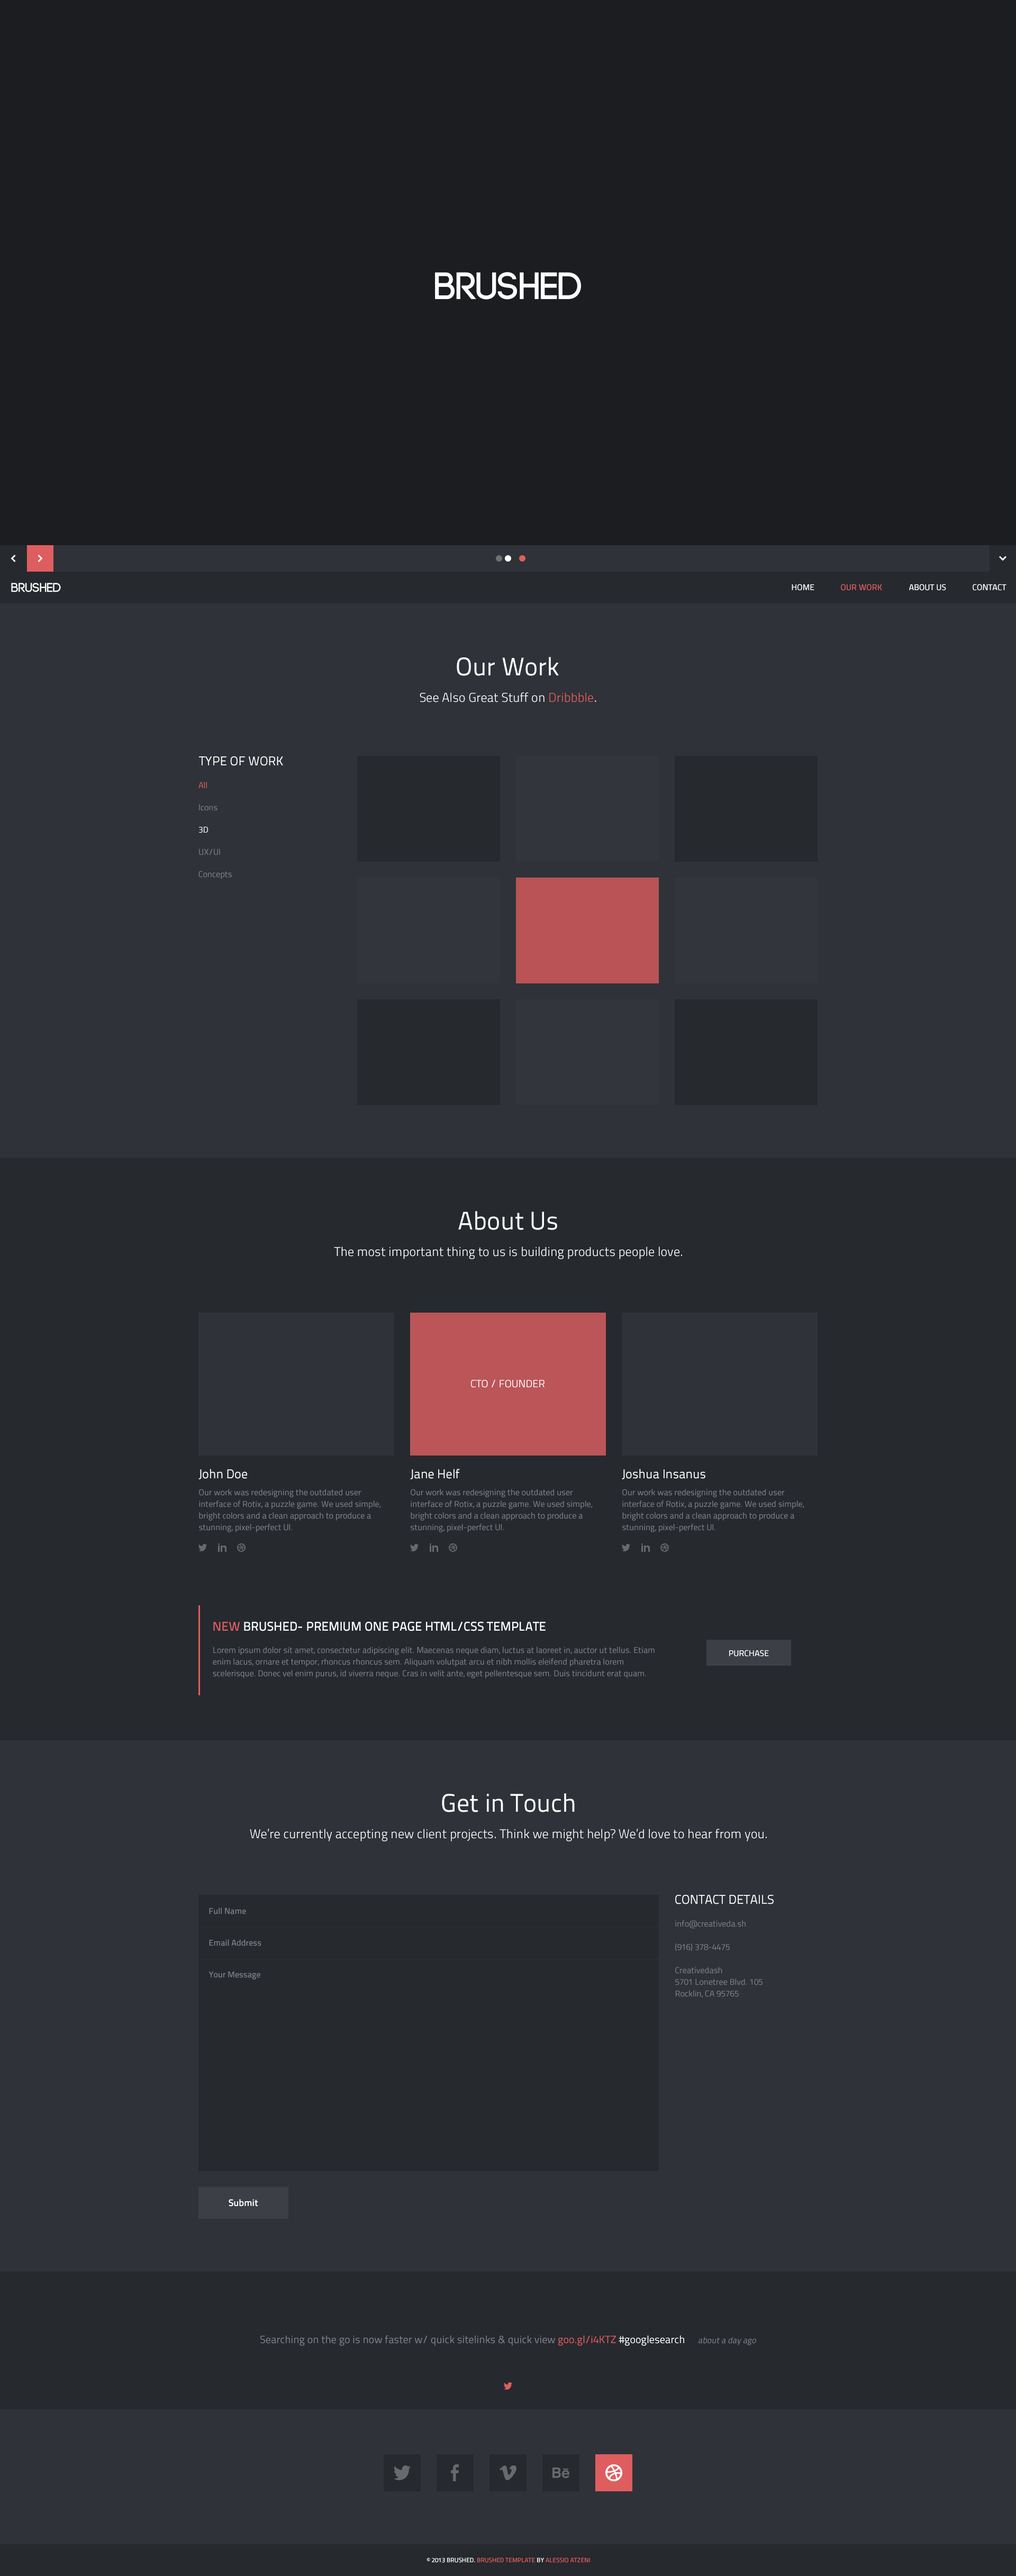
<style>
.page{position:relative;width:1016px;height:2576px;background:#2f3238}
.page>*{position:absolute;margin:0}
.t1{font:8.5px "TitilliumText25L-600wt";color:#fefefe}
.t2{font:8.5px "TitilliumText25L-600wt";color:#de5e60}
.t3{font:25.4px "TitilliumText25L-400wt";color:#fefefe}
.t4{font:12.7px "TitilliumText25L-250wt";color:#fefefe}
.t5{font:12.7px "TitilliumText25L-250wt";color:#de5e60}
.t6{font:12.7px "TitilliumText25L-400wt";color:#fefefe;text-transform:uppercase}
.t7{font:8.5px "TitilliumText25L-400wt";color:#de5e60}
.t8{font:8.5px "TitilliumText25L-400wt";color:#7f8289}
.t9{font:8.5px "TitilliumText25L-400wt";color:#ffffff}
.t10{font:8.5px "TitilliumText25L-400wt";color:#7f8289;text-transform:uppercase}
.t11{font:10.6px "TitilliumText25L-400wt";color:#fefefe}
.t12{font:12.7px "TitilliumText25L-400wt";color:#fefefe}
.t13{font:8.5px/11.6px "TitilliumText25L-400wt";color:#7f8289}
.t14{font:12.7px "TitilliumText25L-600wt";color:#fefefe;text-transform:uppercase}
.t15{font:12.7px "TitilliumText25L-600wt";color:#de5e60;text-transform:uppercase}
.t16{font:8.5px/11.6px "TitilliumText25L-400wt";color:#65676c}
.t17{font:8.5px "TitilliumText25L-600wt";color:#ffffff;text-transform:uppercase}
.t18{font:8.5px "TitilliumText25L-600wt";color:#7f8289}
.t19{font:9.5px "TitilliumText25L-800wt";color:#ffffff}
.t20{font:10.6px "TitilliumText25L-400wt";color:#7f8289}
.t21{font:10.6px "TitilliumText25L-400wt";color:#de5e60}
.t22{font:10.6px "TitilliumText25L-400wt";color:#ffffff}
.t23{font:8.5px "TitilliumText25L-400wt";color:#7f8289;font-style:italic}
.t24{font:6.4px "TitilliumText25L-600wt";color:#de5e60;text-transform:uppercase}
.t25{font:6.4px "TitilliumText25L-600wt";color:#fefefe;text-transform:uppercase}
</style>
<div class="page">
<p class="t1" style="left:792px;top:584px;width:23px;height:7px">HOME</p>
<p class="t2" style="left:841px;top:584px;width:41px;height:7px">OUR WORK</p>
<p class="t1" style="left:909px;top:584px;width:37px;height:7px">ABOUT US</p>
<p class="t1" style="left:973px;top:584px;width:34px;height:7px">CONTACT</p>
<p class="t3" style="left:457px;top:657px;width:102px;height:19px">Our Work</p>
<p class="t4" style="left:420px;top:692px;width:176px;height:10px">See Also Great Stuff on <span class="t5">Dribbble</span>.</p>
<p class="t6" style="left:199px;top:756px;width:84px;height:10px">Type of work</p>
<p class="t7" style="left:198px;top:782px;width:9px;height:6px">All</p>
<p class="t8" style="left:199px;top:804px;width:19px;height:7px">Icons</p>
<p class="t9" style="left:199px;top:827px;width:9px;height:6px">3D</p>
<p class="t8" style="left:199px;top:848px;width:21px;height:7px">UX/UI</p>
<p class="t8" style="left:198px;top:871px;width:34px;height:8px"><span class="t10">C</span>oncepts</p>
<p class="t3" style="left:458px;top:1211px;width:99px;height:19px">About Us</p>
<p class="t4" style="left:334px;top:1246px;width:348px;height:13px">The most important thing to us is building products people love.</p>
<p class="t11" style="left:471px;top:1379px;width:74px;height:9px">CTO / FOUNDER</p>
<p class="t12" style="left:198px;top:1469px;width:49px;height:10px">John Doe</p>
<p class="t12" style="left:410px;top:1469px;width:50px;height:10px">Jane Helf</p>
<p class="t12" style="left:622px;top:1469px;width:84px;height:10px">Joshua Insanus</p>
<p class="t13" style="left:199px;top:1489px;width:182px;height:43px">Our work was redesigning the outdated user interface of Rotix, a puzzle game. We used simple, bright colors and a clean approach to produce a stunning, pixel-perfect UI.</p>
<p class="t13" style="left:411px;top:1489px;width:182px;height:43px">Our work was redesigning the outdated user interface of Rotix, a puzzle game. We used simple, bright colors and a clean approach to produce a stunning, pixel-perfect UI.</p>
<p class="t13" style="left:622px;top:1489px;width:183px;height:43px">Our work was redesigning the outdated user interface of Rotix, a puzzle game. We used simple, bright colors and a clean approach to produce a stunning, pixel-perfect UI.</p>
<p class="t14" style="left:213px;top:1622px;width:333px;height:9px"><span class="t15">NEW </span>Brushed- PRemium one page html/css template</p>
<p class="t13" style="left:213px;top:1647px;width:442px;height:31px">Lorem ipsum dolor sit amet, consectetur adipiscing elit. Maecenas neque diam, luctus at laoreet in, auctor ut tellus. Etiam enim lacus, ornare et tempor, rhoncus rhoncus sem. Aliquam volutpat arcu et nibh mollis eleifend pharetra lorem scelerisque. Donec vel enim purus, id viverra neque. Cras in velit ante, eget pellentesque sem. Duis tincidunt erat quam. <span class="t16">Etiam placerat sapien elit.</span></p>
<p class="t17" style="left:729px;top:1650px;width:40px;height:7px">PURCHASE</p>
<p class="t3" style="left:442px;top:1793px;width:133px;height:19px">Get in Touch</p>
<p class="t4" style="left:250px;top:1829px;width:517px;height:12px">We’re currently accepting new client projects. Think we might help? We’d love to hear from you.</p>
<p class="t6" style="left:675px;top:1895px;width:99px;height:9px">Contact Details</p>
<p class="t18" style="left:209px;top:1908px;width:37px;height:6px">Full Name</p>
<p class="t13" style="left:675px;top:1920px;width:88px;height:77px">info@creativeda.sh<br><br>(916) 378-4475<br><br>Creativedash<br>5701 Lonetree Blvd. 105<br>Rocklin, CA 95765</p>
<p class="t18" style="left:209px;top:1939px;width:52px;height:7px">Email Address</p>
<p class="t18" style="left:209px;top:1972px;width:51px;height:8px">Your Message</p>
<p class="t19" style="left:229px;top:2199px;width:29px;height:8px">Submit</p>
<p class="t20" style="left:260px;top:2335px;width:496px;height:11px">Searching on the go is now faster w/ quick sitelinks &amp; quick view <span class="t21">goo.gl/i4KTZ</span><span class="t22"> #googlesearch </span><span class="t23">about a day ago</span></p>
<p class="t24" style="left:427px;top:2557px;width:163px;height:6px"><span class="t25">© 2013 BRUSHED. </span>BRUSHED TEMPLATE<span class="t25"> by </span>ALESSIO ATZENI</p>
</div>
